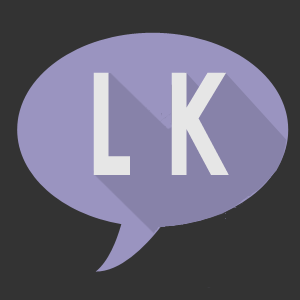
<style>
.page{position:relative;width:300px;height:300px;background:#333333}
.page>*{position:absolute;margin:0}
.t1{font:142.6px "CenturyGothic-Bold";color:#e6e6e6;scale:0.76 1}
</style>
<div class="page">
<p class="t1" style="left:93px;top:72px;width:136px;height:103px">L K</p>
</div>
